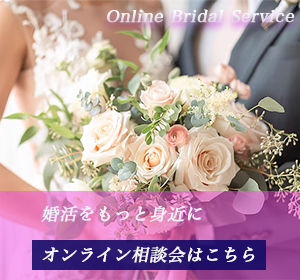
<style>
.page{position:relative;width:300px;height:280px}
.page>*{position:absolute;margin:0}
.t1{font:17px "HiraMinPro-W3";letter-spacing:0.025em;color:#ebebeb;font-weight:bold;font-style:italic}
.t2{font:17px "HiraMinPro-W3";letter-spacing:0.025em;color:#f6f5fa;font-weight:bold;font-style:italic}
.t3{font:17px "HiraMinPro-W3";letter-spacing:0.025em;color:#f0eff5;font-weight:bold;font-style:italic}
</style>
<div class="page">
<p class="t1" style="left:107px;top:9px;width:188px;height:14px">Online Bridal Service</p>
<p class="t2" style="left:41px;top:205px;width:214px;height:58px"><span class="t3">婚活をもっと身近に<br><br></span>オンライン相談会はこちら</p>
</div>
